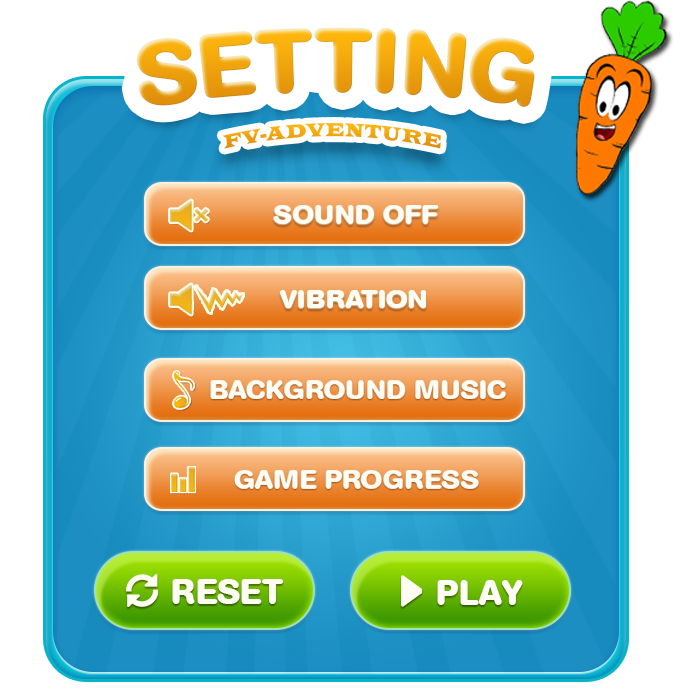
<style>
.page{position:relative;width:700px;height:700px;background:#ffffff}
.page>*{position:absolute;margin:0}
.t1{font:90px "AGBookRounded-Bold";color:#f8a900;text-transform:uppercase}
.t2{font:20.3px "LatinWide";color:#f3a80c;text-transform:uppercase;scale:0.68 1}
.t3{font:26.1px "AGBookRounded-Bold";color:#fdfdf3;text-transform:uppercase;scale:1.07 1}
.t4{font:35px "AGBookRounded-Bold";color:#fdfdf3;text-transform:uppercase}
</style>
<div class="page">
<p class="t1" style="left:136px;top:27px;width:399px;height:80px">SETTING</p>
<p class="t2" style="left:222px;top:123px;width:219px;height:26px">fv-adventure</p>
<p class="t3" style="left:273px;top:205px;width:166px;height:19px">SOUND OFF</p>
<p class="t3" style="left:280px;top:290px;width:146px;height:18px">VIbration</p>
<p class="t3" style="left:210px;top:380px;width:296px;height:19px">BACKGROUND MUSIC</p>
<p class="t3" style="left:234px;top:470px;width:245px;height:19px">GAME PROGRESS</p>
<p class="t4" style="left:172px;top:579px;width:112px;height:25px">RESET</p>
<p class="t4" style="left:437px;top:580px;width:86px;height:25px">PLAY</p>
</div>
